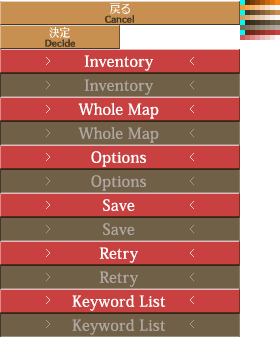
<style>
.page{position:relative;width:280px;height:353px;background:#706048}
.page>*{position:absolute;margin:0}
.t1{font:15px/24px "KozMinPro-Medium";letter-spacing:0.025em;color:#ffffff}
.t2{font:15px/24px "KozMinPro-Medium";letter-spacing:0.025em;color:#b0a8a0}
</style>
<div class="page">
<p class="t1" style="left:72px;top:55px;width:94px;height:280px;text-align:center">Inventory<br><span class="t2">Inventory<br></span>Whole Map<br><span class="t2">Whole Map<br></span>Options<br><span class="t2">Options<br></span>Save<br><span class="t2">Save<br></span>Retry<br><span class="t2">Retry<br></span>Keyword List<br><span class="t2">Keyword List</span></p>
</div>
